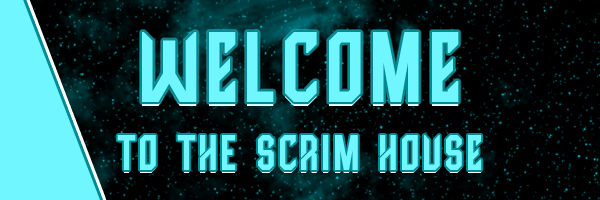
<style>
.page{position:relative;width:600px;height:200px;background:#000000}
.page>*{position:absolute;margin:0}
.t1{font:100px "HighJersey";letter-spacing:0.075em;color:#6ff6ff}
.t2{font:50px "HighJersey";letter-spacing:0.075em;color:#6ff6ff}
</style>
<div class="page">
<p class="t1" style="left:142px;top:32px;width:317px;height:70px">WElComE</p>
<p class="t2" style="left:117px;top:135px;width:365px;height:35px">to tHe SCRim HoUSE</p>
</div>
